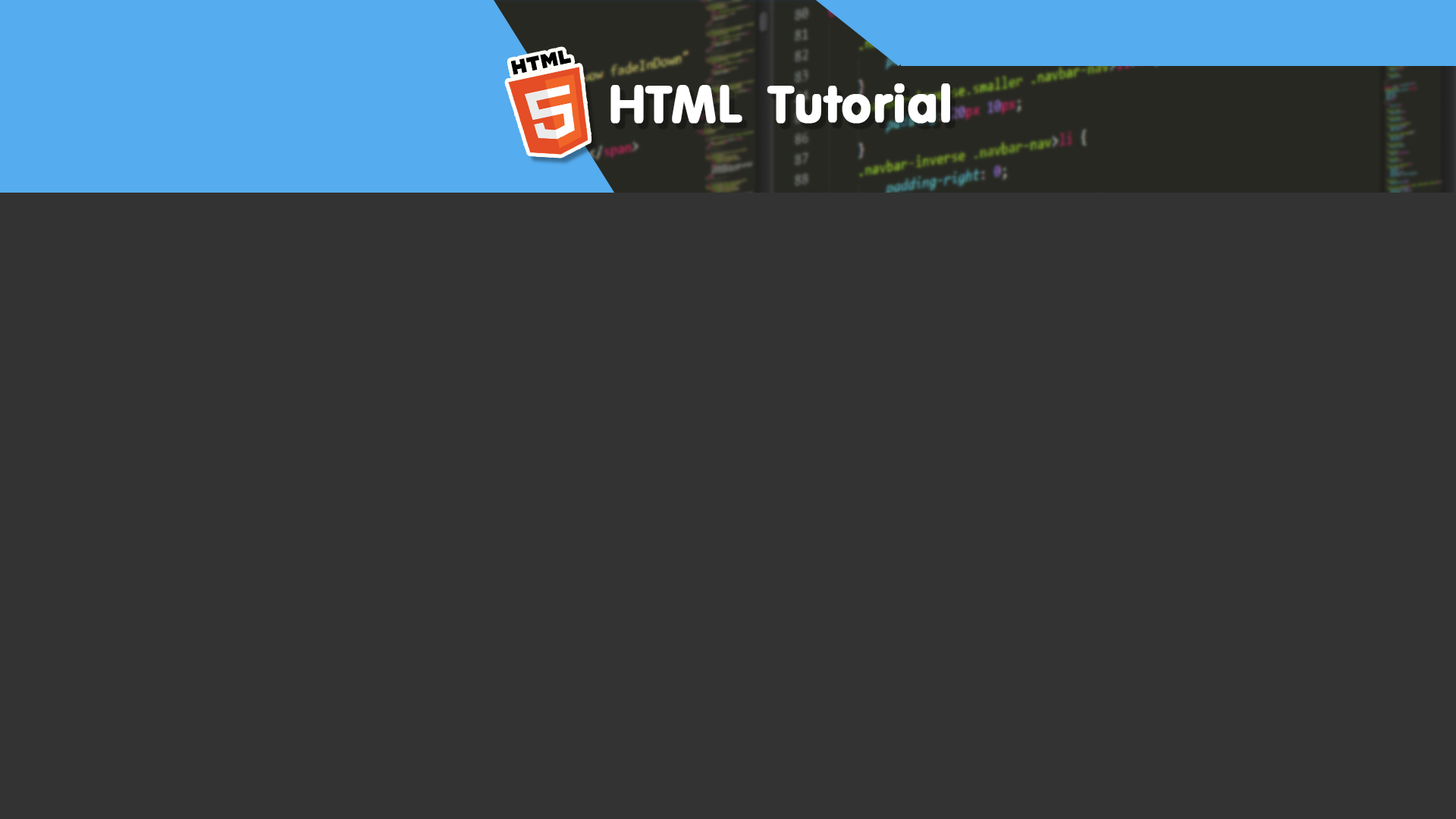
<style>
.page{position:relative;width:1456px;height:819px;background:#333333}
.page>*{position:absolute;margin:0}
.t1{font:75.8px "PSL-Omyim";color:#ffffff;font-weight:bold}
</style>
<div class="page">
<p class="t1" style="left:610px;top:83px;width:340px;height:41px">HTML Tutorial</p>
</div>
